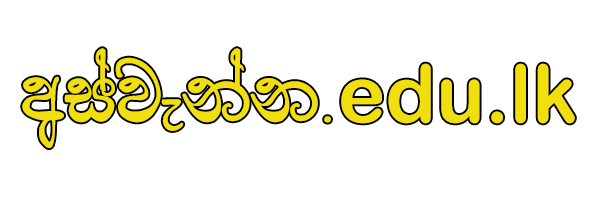
<style>
.page{position:relative;width:600px;height:200px;background:#ffffff}
.page>*{position:absolute;margin:0}
.t1{font:80.5px "apex-a.pura-028";color:#f0de0f}
.t2{font:80.5px "Roboto-Light";color:#f0de0f}
.t3{font:80.5px "ArialRoundedMTBold";color:#f0de0f}
</style>
<div class="page">
<p class="t1" style="left:22px;top:48px;width:553px;height:100px">wiajekak<span class="t2">.</span><span class="t3">edu.lk</span></p>
</div>
